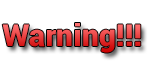
<style>
.page{position:relative;width:150px;height:75px;background:#ffffff}
.page>*{position:absolute;margin:0}
.t1{font:30px "Roboto-Black";letter-spacing:0.01em}
</style>
<div class="page">
<p class="t1" style="left:2px;top:23px;width:139px;height:30px">Warning!!!</p>
</div>
